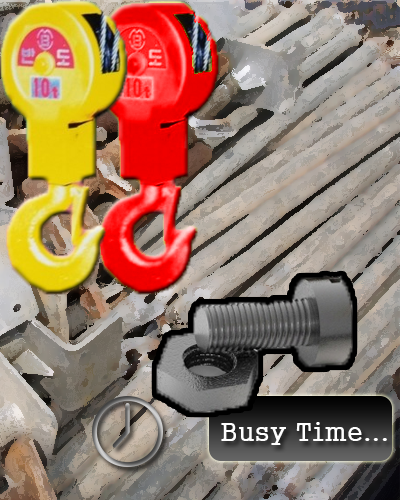
<style>
.page{position:relative;width:400px;height:500px}
.page>*{position:absolute;margin:0}
.t1{font:25.7px "Gungsuh";color:#ffffff}
</style>
<div class="page">
<p class="t1" style="left:221px;top:422px;width:166px;height:23px">Busy Time...</p>
</div>
